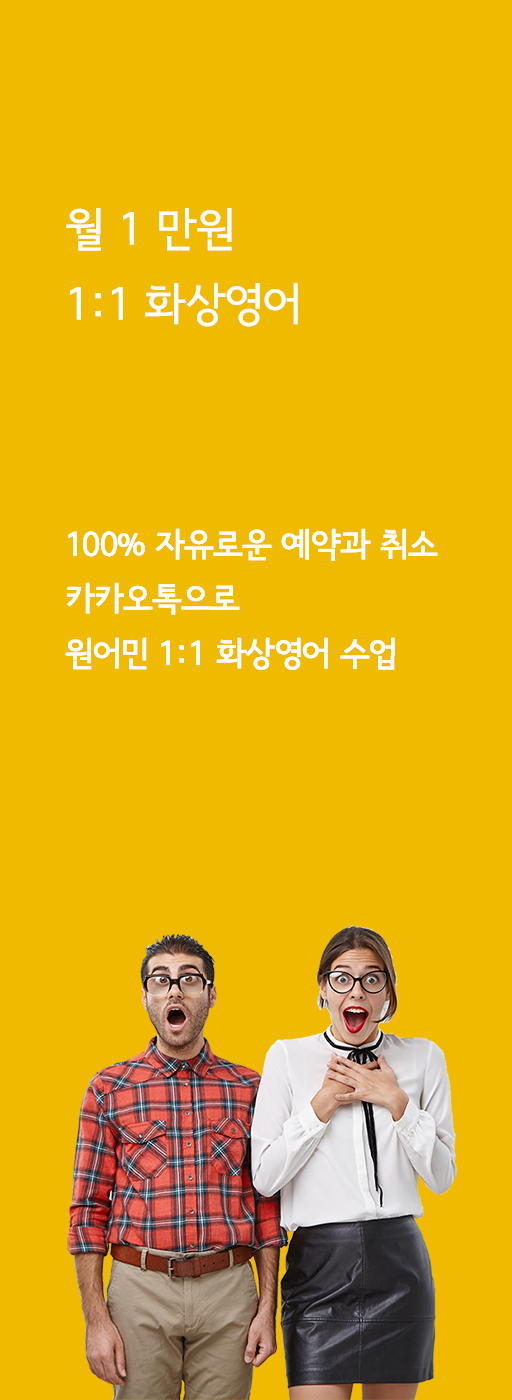
<style>
.page{position:relative;width:512px;height:1400px;background:#efba00}
.page>*{position:absolute;margin:0}
.t1{font:45.4px/75px "SeoulNamsanB";letter-spacing:-0.025em;color:#ffffff}
.t2{font:33.1px/54.6px "SeoulNamsanB";letter-spacing:-0.025em;color:#ffffff}
</style>
<div class="page">
<p class="t1" style="left:66px;top:208px;width:232px;height:119px">월 1 만원<br>1:1 화상영어</p>
<p class="t2" style="left:65px;top:528px;width:373px;height:142px">100% 자유로운 예약과 취소<br>카카오톡으로<br>원어민 1:1 화상영어 수업</p>
</div>
